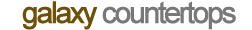
<style>
.page{position:relative;width:252px;height:30px;background:#ffffff}
.page>*{position:absolute;margin:0}
.t1{font:30px "ArialMT";letter-spacing:-0.1em;color:#797878;font-weight:bold}
.t2{font:30px "ArialMT";letter-spacing:-0.1em;color:#6d5009;font-weight:bold}
</style>
<div class="page">
<p class="t1" style="left:22px;top:1px;width:214px;height:29px"><span class="t2">galaxy </span>countertops</p>
</div>
